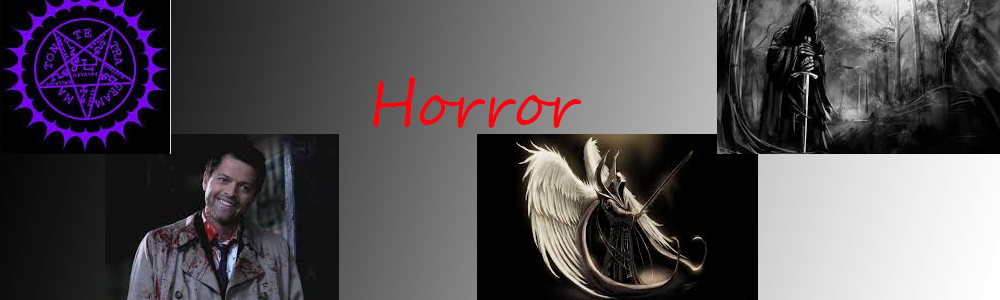
<style>
.page{position:relative;width:1000px;height:300px}
.page>*{position:absolute;margin:0}
.t1{font:60px "SegoeScript";color:#f30712}
</style>
<div class="page">
<p class="t1" style="left:372px;top:77px;width:209px;height:51px">Horror</p>
</div>
